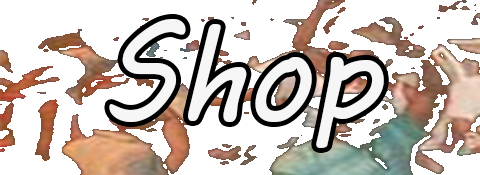
<style>
.page{position:relative;width:480px;height:175px;background:#ffffff}
.page>*{position:absolute;margin:0}
.t1{font:130.3px "MVBoli";color:#f6f6f6;scale:0.96 1}
</style>
<div class="page">
<p class="t1" style="left:109px;top:19px;width:275px;height:129px">Shop</p>
</div>
